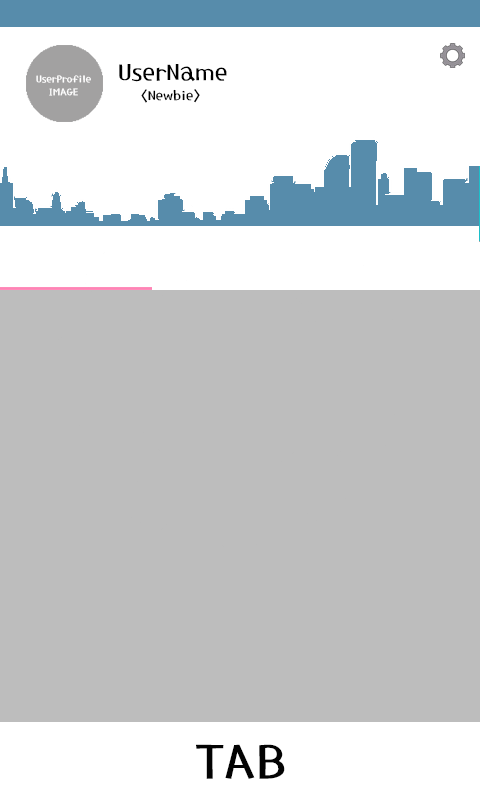
<style>
.page{position:relative;width:480px;height:800px;background:#bdbdbd}
.page>*{position:absolute;margin:0}
.t1{font:30px "HoonMakdR";color:#000000}
.t2{font:12.5px/12.5px "HoonMakdR";color:#ffffff}
.t3{font:17px "HoonMakdR";color:#000000}
.t4{font:62px "HoonMakdR";color:#030303}
</style>
<div class="page">
<p class="t1" style="left:119px;top:64px;width:108px;height:18px">UserName</p>
<p class="t2" style="left:36px;top:75px;width:55px;height:21px;text-align:center">UserProfile<br>IMAGE</p>
<p class="t3" style="left:141px;top:89px;width:59px;height:14px">&lt;Newbie&gt;</p>
<p class="t4" style="left:196px;top:744px;width:89px;height:35px">TAB</p>
</div>
